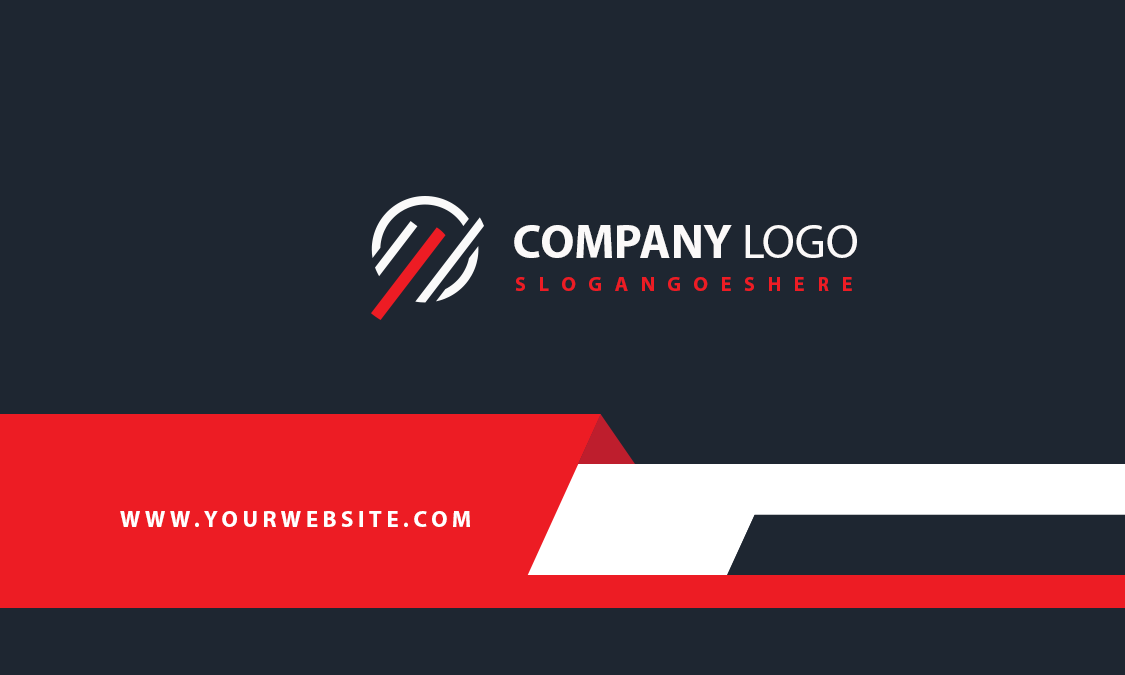
<style>
.page{position:relative;width:1125px;height:675px;background:#1e2631}
.page>*{position:absolute;margin:0}
.t1{font:47.5px "MyriadPro-Bold";color:#fbf9f9}
.t2{font:47.5px "MyriadPro-Regular";color:#fbf9f9}
.t3{font:20.2px "MyriadPro-Bold";letter-spacing:0.2em;color:#ed1c24}
.t4{font:23px "MyriadPro-Bold";letter-spacing:0.2em;color:#ffffff}
</style>
<div class="page">
<p class="t1" style="left:514px;top:225px;width:343px;height:33px">COMPANY<span class="t2"> LOGO</span></p>
<p class="t3" style="left:515px;top:277px;width:337px;height:14px">S L O G A N G O E S H E R E</p>
<p class="t4" style="left:120px;top:511px;width:350px;height:16px">WWW.YOURWEBSITE.COM</p>
</div>
